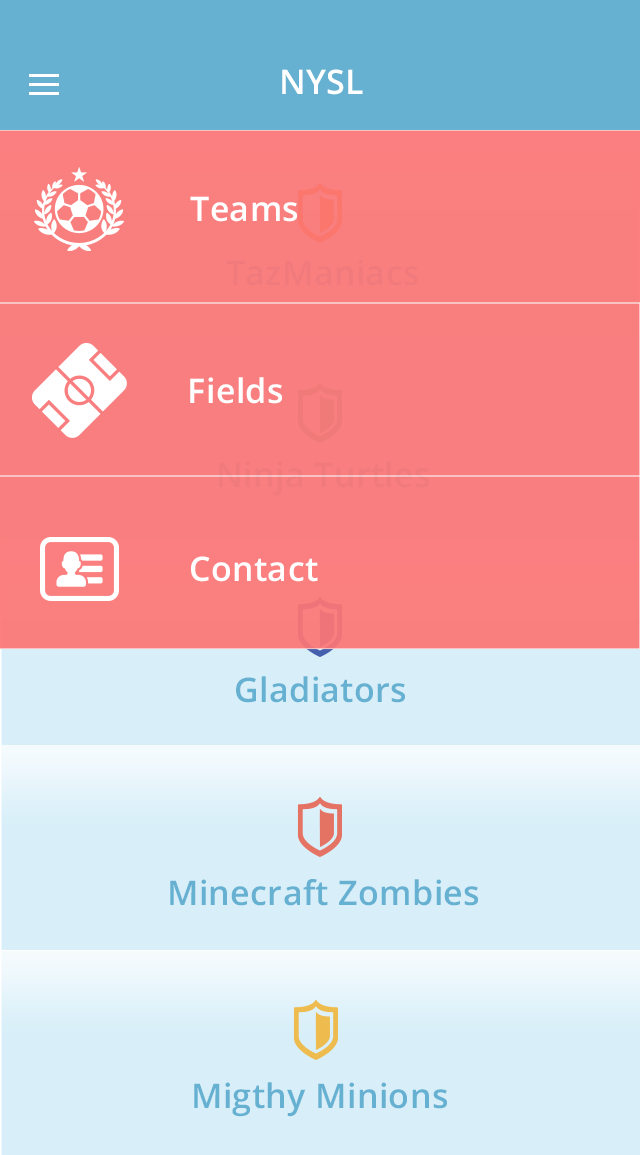
<style>
.page{position:relative;width:640px;height:1155px;background:#d8eff9}
.page>*{position:absolute;margin:0}
.t1{font:34px "OpenSans-Semibold";letter-spacing:0.01em;color:#ffffff}
.t2{font:34px "OpenSans-Semibold";letter-spacing:0.01em;color:#f17a7c}
.t3{font:34px "OpenSans-Semibold";letter-spacing:0.01em;color:#66b1d1}
</style>
<div class="page">
<p class="t1" style="left:282px;top:69px;width:81px;height:26px">NYSL</p>
<p class="t1" style="left:190px;top:196px;width:107px;height:26px">Teams</p>
<p class="t2" style="left:226px;top:259px;width:192px;height:27px">TazManiacs</p>
<p class="t1" style="left:190px;top:377px;width:92px;height:27px">Fields</p>
<p class="t2" style="left:219px;top:461px;width:210px;height:35px">Ninja Turtles</p>
<p class="t1" style="left:191px;top:556px;width:127px;height:26px">Contact</p>
<p class="t3" style="left:236px;top:676px;width:169px;height:27px">Gladiators</p>
<p class="t3" style="left:170px;top:879px;width:308px;height:27px">Minecraft Zombies</p>
<p class="t3" style="left:194px;top:1082px;width:253px;height:35px">Migthy Minions</p>
</div>
